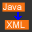
<style>
.page{position:relative;width:32px;height:32px;background:#333333}
.page>*{position:absolute;margin:0}
.t1{font:9px "ArialMT"}
.t2{font:9px "ArialMT";color:#ffffff}
</style>
<div class="page">
<p class="t1" style="left:3px;top:3px;width:19px;height:7px">Java</p>
<p class="t2" style="left:6px;top:21px;width:19px;height:7px">XML</p>
</div>
